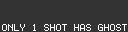
<style>
.page{position:relative;width:128px;height:32px;background:#333333}
.page>*{position:absolute;margin:0}
.t1{font:8px "Terminal";color:#ffffff}
</style>
<div class="page">
<p class="t1" style="left:2px;top:24px;width:125px;height:7px">ONLY 1 SHOT HAS GHOST</p>
</div>
